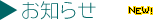
<style>
.page{position:relative;width:160px;height:20px;background:#ffffff}
.page>*{position:absolute;margin:0}
.t1{font:20px "FMotoyaCedar-W1-90mskp-RKSJ-H";color:#006666}
</style>
<div class="page">
<p class="t1" style="left:22px;top:1px;width:74px;height:19px">お知らせ</p>
</div>
